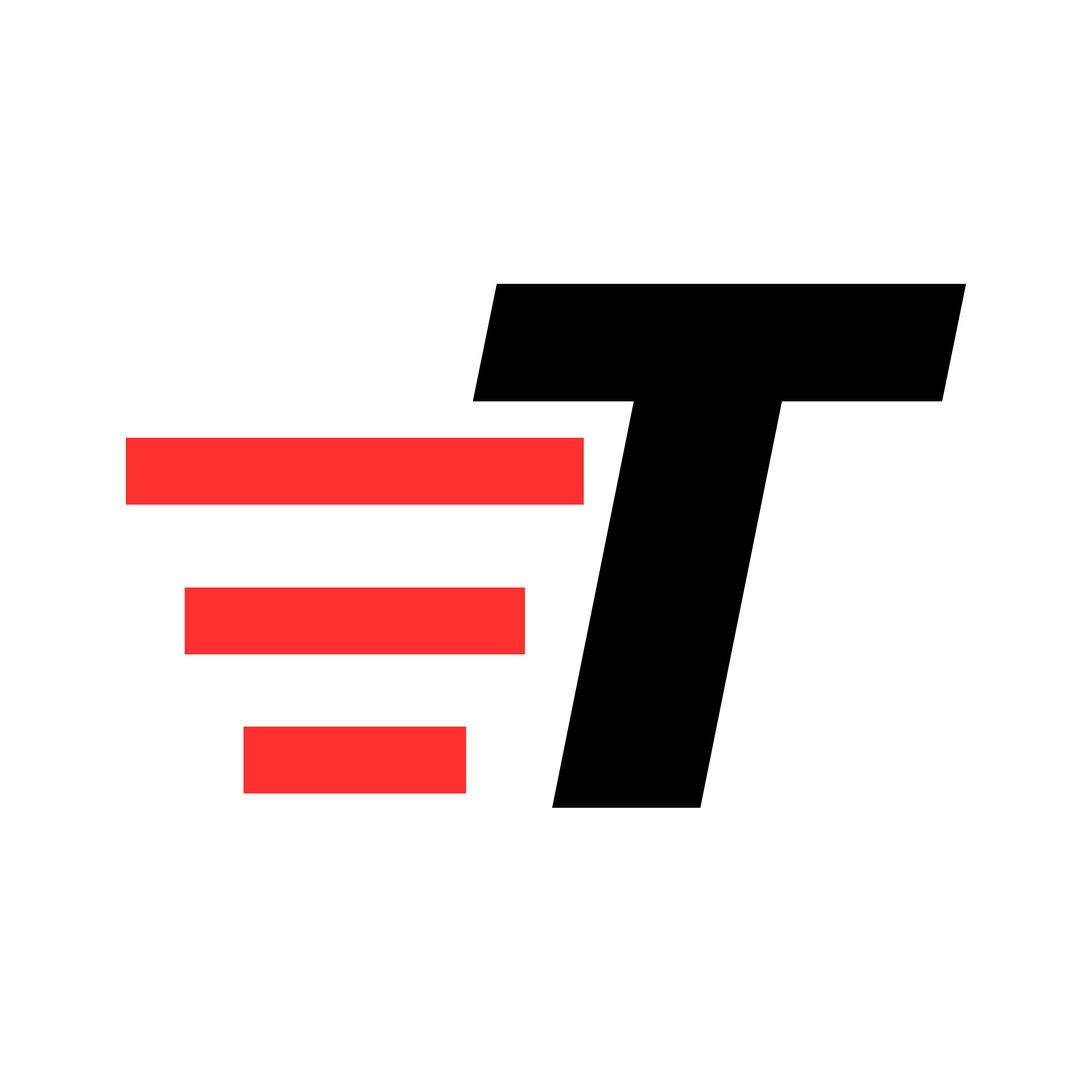
<style>
.page{position:relative;width:1092px;height:1092px;background:#ffffff}
.page>*{position:absolute;margin:0}
.t1{font:748.5px "Montserrat-ExtraBoldItalic";color:#000000}
</style>
<div class="page">
<p class="t1" style="left:473px;top:284px;width:493px;height:524px">T</p>
</div>
